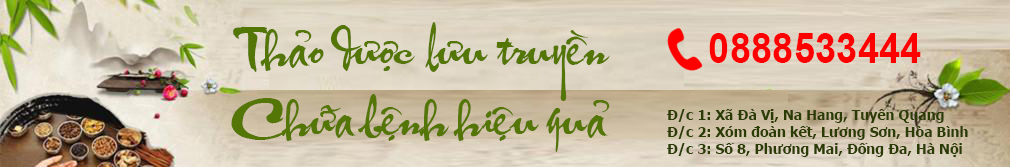
<style>
.page{position:relative;width:1010px;height:167px}
.page>*{position:absolute;margin:0}
.t1{font:43.4px/70px "VNI-Thufap2-Normal";color:#547606}
.t2{font:41.7px "Arial-BoldMT";color:#ff0000;scale:0.92 1}
.t3{font:14px "Tahoma-Bold";color:#2a3b03}
</style>
<div class="page">
<p class="t1" style="left:231px;top:22px;width:379px;height:130px;text-align:center">Thaûo döôïc löu truyeàn<br>Chöõa beänh hieäu quaû</p>
<p class="t2" style="left:709px;top:33px;width:212px;height:30px">0888533444</p>
<p class="t3" style="left:667px;top:109px;width:301px;height:48px">Đ/c 1: Xã Đà Vị, Na Hang, Tuyên Quang <br>Đ/c 2: Xóm đoàn kết, Lương Sơn, Hòa Bình <br>Đ/c 3: Số 8, Phương Mai, Đống Đa, Hà Nội</p>
</div>
